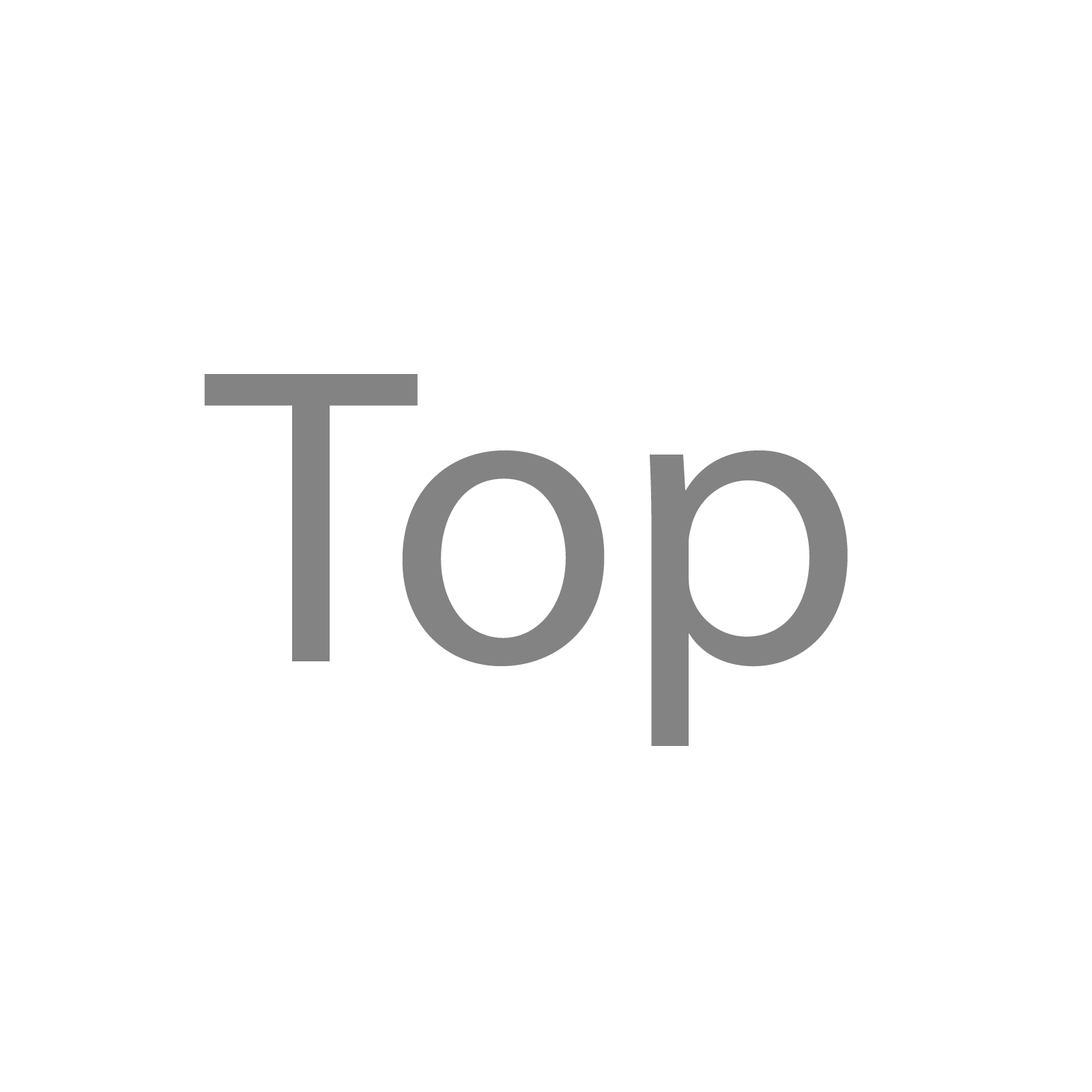
<style>
.page{position:relative;width:1092px;height:1092px;background:#ffffff}
.page>*{position:absolute;margin:0}
.t1{font:426.6px "MyriadPro-Regular";color:#838383}
</style>
<div class="page">
<p class="t1" style="left:204px;top:374px;width:644px;height:372px">Top</p>
</div>
